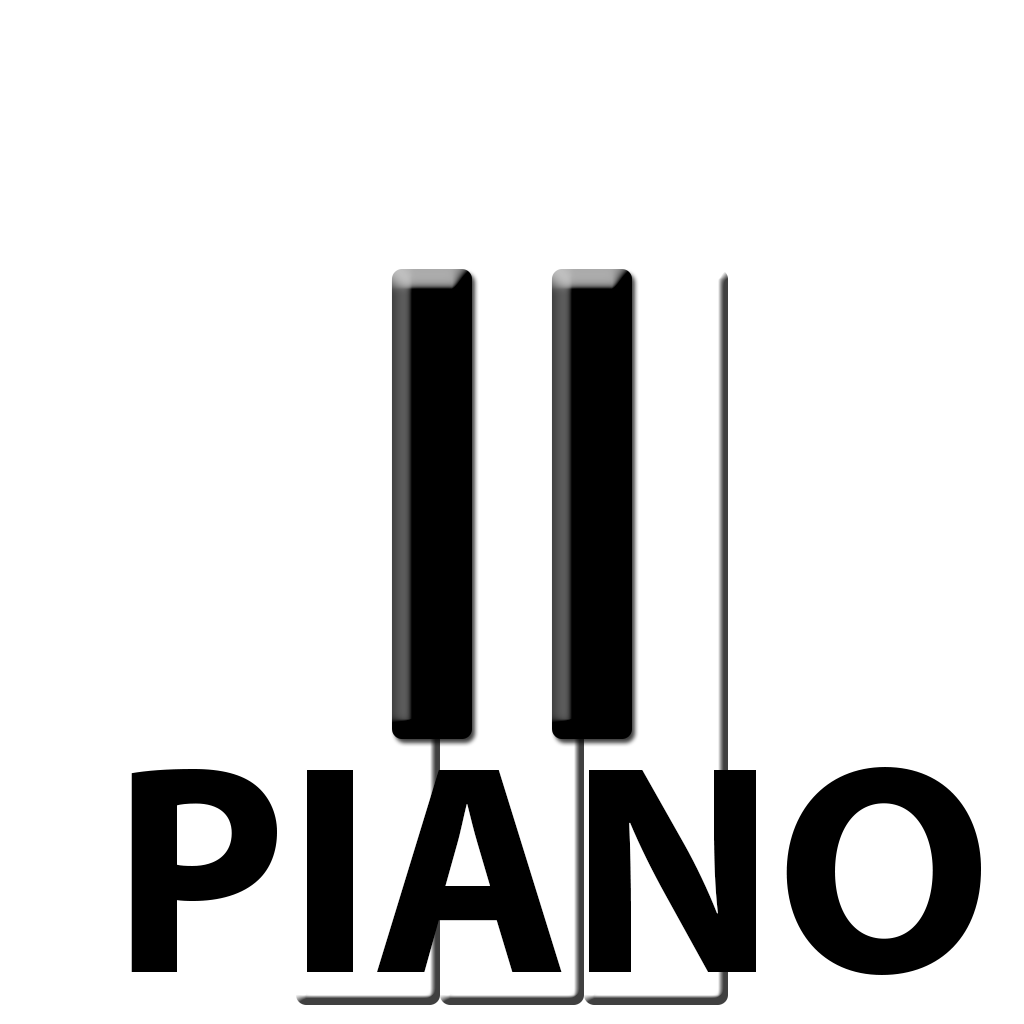
<style>
.page{position:relative;width:1024px;height:1024px;background:#ffffff}
.page>*{position:absolute;margin:0}
.t1{font:300px "MyriadPro-Bold";color:#000000}
</style>
<div class="page">
<p class="t1" style="left:131px;top:767px;width:850px;height:208px">PIANO</p>
</div>
